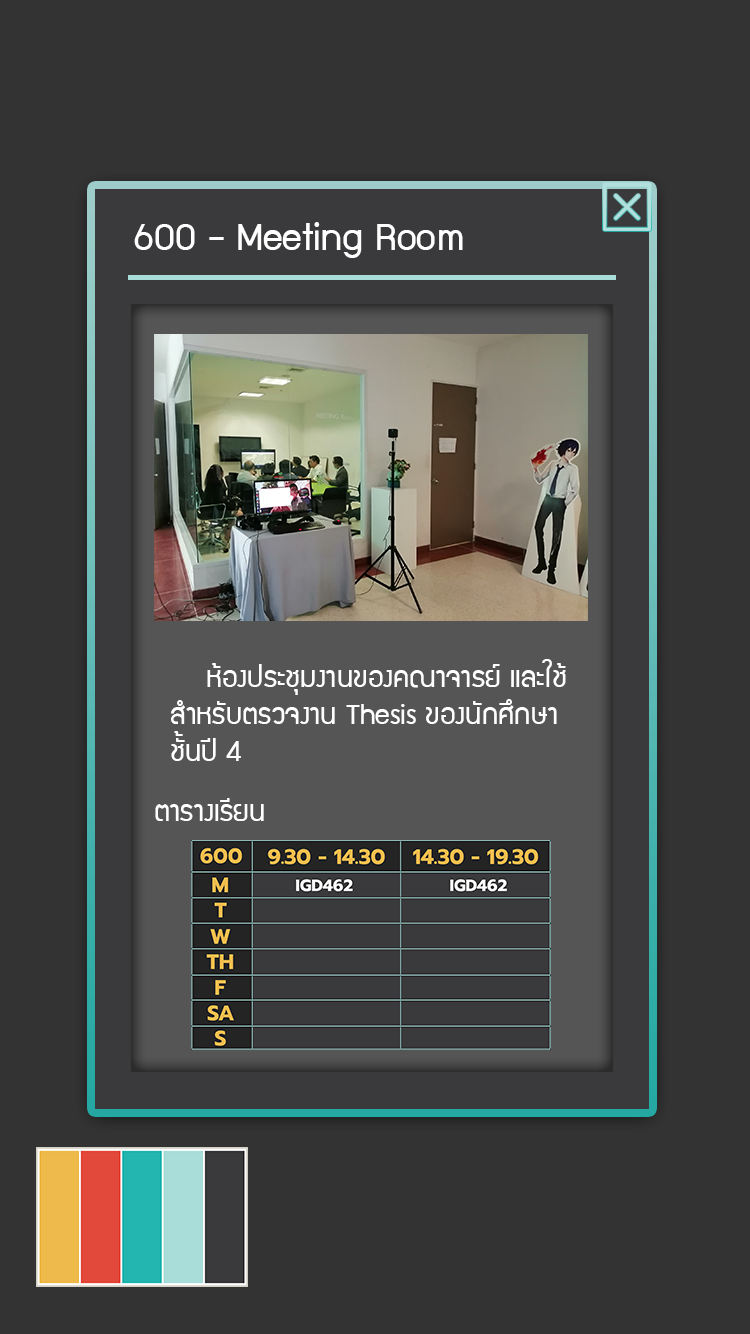
<style>
.page{position:relative;width:750px;height:1334px;background:#333333}
.page>*{position:absolute;margin:0}
.t1{font:43.2px "supermarket";color:#ffffff}
.t2{font:32px/37.2px "supermarket";color:#ffffff}
.t3{font:32px "supermarket";color:#ffffff}
</style>
<div class="page">
<p class="t1" style="left:134px;top:222px;width:329px;height:36px">600 - Meeting Room</p>
<p class="t2" style="left:171px;top:659px;width:395px;height:102px">ห้องประชุมงานของคณาจารย์ และใช้<br>สำหรับตรวจงาน Thesis ของนักศึกษา<br>ชั้นปี 4</p>
<p class="t3" style="left:155px;top:798px;width:109px;height:23px">ตารางเรียน</p>
</div>
